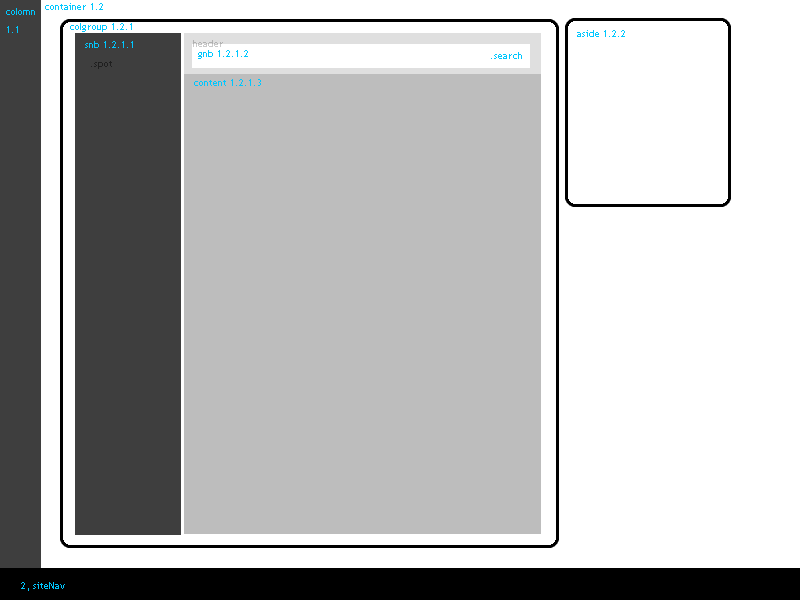
<style>
.page{position:relative;width:800px;height:600px;background:#ffffff}
.page>*{position:absolute;margin:0}
.t1{font:10px "TrebuchetMS";color:#00c7ff}
.t2{font:10px "TrebuchetMS"}
.t3{font:10px "TrebuchetMS";color:#1f1f1f}
</style>
<div class="page">
<p class="t1" style="left:45px;top:3px;width:58px;height:7px">container 1.2</p>
<p class="t1" style="left:6px;top:8px;width:29px;height:25px">colomn<br>1.1</p>
<p class="t1" style="left:70px;top:23px;width:62px;height:9px">colgroup 1.2.1</p>
<p class="t1" style="left:577px;top:30px;width:48px;height:7px">aside 1.2.2</p>
<p class="t1" style="left:85px;top:41px;width:48px;height:7px">snb 1.2.1.1</p>
<p class="t2" style="left:193px;top:40px;width:30px;height:7px">header</p>
<p class="t1" style="left:198px;top:50px;width:50px;height:9px">gnb 1.2.1.2</p>
<p class="t1" style="left:491px;top:52px;width:31px;height:7px">.search</p>
<p class="t3" style="left:91px;top:61px;width:21px;height:8px">.spot</p>
<p class="t1" style="left:194px;top:79px;width:67px;height:7px">content 1.2.1.3</p>
<p class="t1" style="left:21px;top:582px;width:44px;height:9px">2, siteNav</p>
</div>
